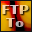
<style>
.page{position:relative;width:32px;height:32px}
.page>*{position:absolute;margin:0}
.t1{font:12.8px/13px "BritannicBold";letter-spacing:0.04em;scale:1.25 1}
</style>
<div class="page">
<p class="t1" style="left:2px;top:5px;width:27px;height:22px;text-align:center">FTP<br>To</p>
</div>
